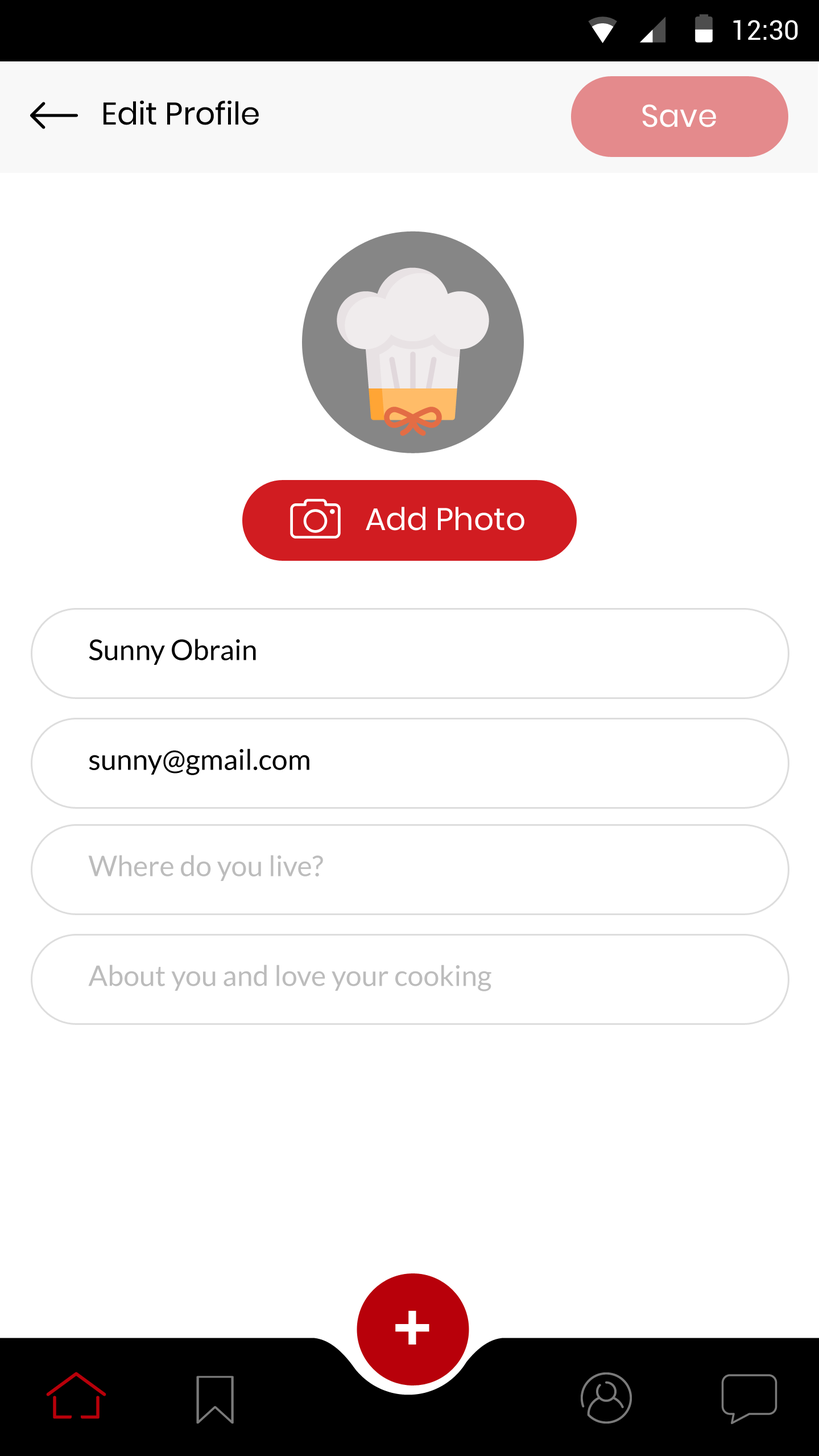
<style>
.page{position:relative;width:819px;height:1456px;background:#ffffff}
.page>*{position:absolute;margin:0}
.t1{font:27.3px "Roboto-Regular";color:#ffffff}
.t2{font:31.3px "Poppins-Regular";color:#000000}
.t3{font:31.3px "Poppins-Regular";color:#ffffff}
.t4{font:28.4px "Lato-Regular";color:#000000}
.t5{font:28.4px "Lato-Regular";color:#bcbcbc}
.t6{font:69.3px "OpenSans-Bold";color:#ffffff;text-transform:uppercase}
</style>
<div class="page">
<p class="t1" style="left:733px;top:20px;width:65px;height:20px">12:30</p>
<p class="t2" style="left:104px;top:100px;width:155px;height:25px">Edit Profile</p>
<p class="t3" style="left:642px;top:104px;width:74px;height:23px">Save</p>
<p class="t3" style="left:366px;top:507px;width:158px;height:24px">Add Photo</p>
<p class="t4" style="left:89px;top:639px;width:167px;height:26px">Sunny Obrain</p>
<p class="t4" style="left:89px;top:748px;width:220px;height:27px">sunny@gmail.com</p>
<p class="t5" style="left:88px;top:855px;width:235px;height:26px">Where do you live?</p>
<p class="t5" style="left:88px;top:965px;width:403px;height:26px">About you and love your cooking</p>
<p class="t6" style="left:395px;top:1310px;width:34px;height:35px">+</p>
</div>
